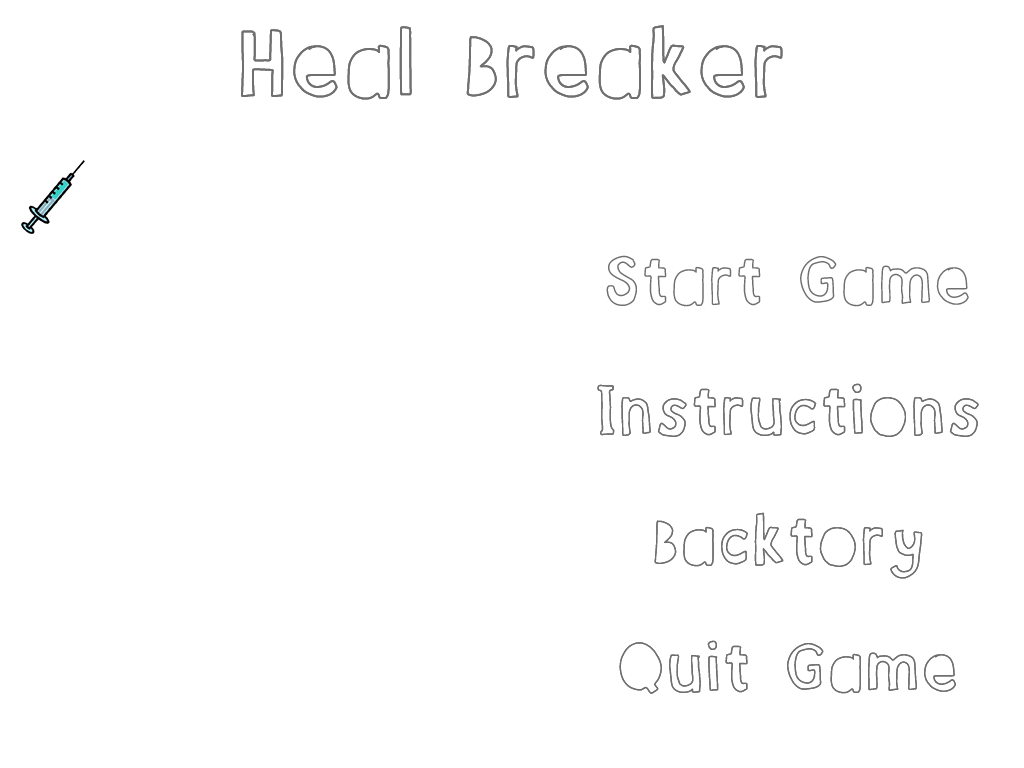
<style>
.page{position:relative;width:1024px;height:768px;background:#ffffff}
.page>*{position:absolute;margin:0}
.t1{font:100px "bubble_mim";color:#6f6f6f}
.t2{font:72px "bubble_mim";color:#6f6f6f}
</style>
<div class="page">
<p class="t1" style="left:241px;top:25px;width:542px;height:75px">Heal Breaker</p>
<p class="t2" style="left:606px;top:255px;width:363px;height:52px">Start Game</p>
<p class="t2" style="left:597px;top:383px;width:382px;height:54px">Instructions</p>
<p class="t2" style="left:654px;top:512px;width:269px;height:67px">Backtory</p>
<p class="t2" style="left:619px;top:640px;width:337px;height:54px">Quit Game</p>
</div>
